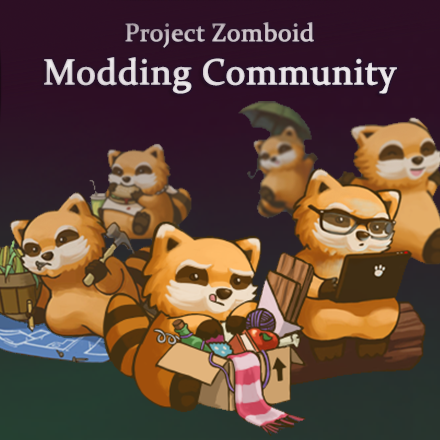
<style>
.page{position:relative;width:440px;height:440px}
.page>*{position:absolute;margin:0}
.t1{font:36px "Constantia";color:#ded9dd;font-weight:bold}
.t2{font:25px "Constantia";color:#ded9dd;font-weight:bold}
</style>
<div class="page">
<p class="t1" style="left:44px;top:22px;width:353px;height:72px;text-align:center"><span class="t2">Project Zomboid<br></span>Modding Community</p>
</div>
